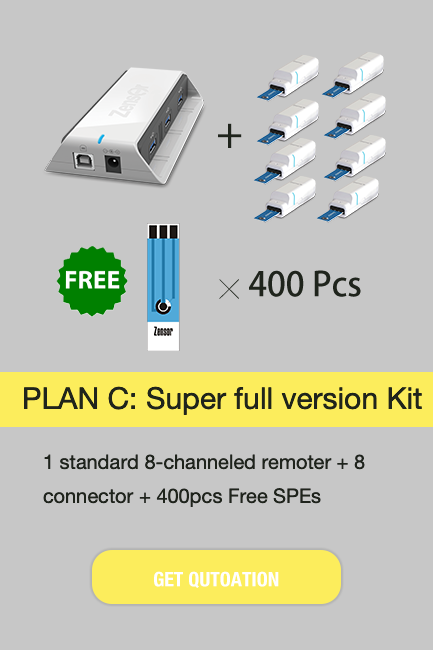
<style>
.page{position:relative;width:433px;height:650px;background:#c7c7c7}
.page>*{position:absolute;margin:0}
.t1{font:40px "AdobeHeitiStd-Regular";color:#1f241c}
.t2{font:33.3px "AdobeHeitiStd-Regular";color:#1f241c}
.t3{font:20px "SimHei";color:#1f241c}
.t4{font:30px "HelveticaNeue";color:#1f241c}
.t5{font:20px/33.8px "HelveticaNeue";color:#1f241c}
.t6{font:20px "HelveticaNeue-CondensedBold";color:#ffffff}
</style>
<div class="page">
<p class="t1" style="left:218px;top:123px;width:24px;height:25px">＋</p>
<p class="t2" style="left:219px;top:270px;width:142px;height:29px"><span class="t3">╳  </span>400 Pcs</p>
<p class="t4" style="left:24px;top:386px;width:398px;height:29px">PLAN C: Super full version Kit</p>
<p class="t5" style="left:43px;top:454px;width:322px;height:53px">1 standard 8-channeled remoter + 8 connector + 400pcs Free SPEs</p>
<p class="t6" style="left:154px;top:571px;width:125px;height:17px">GET QUTOATION</p>
</div>
